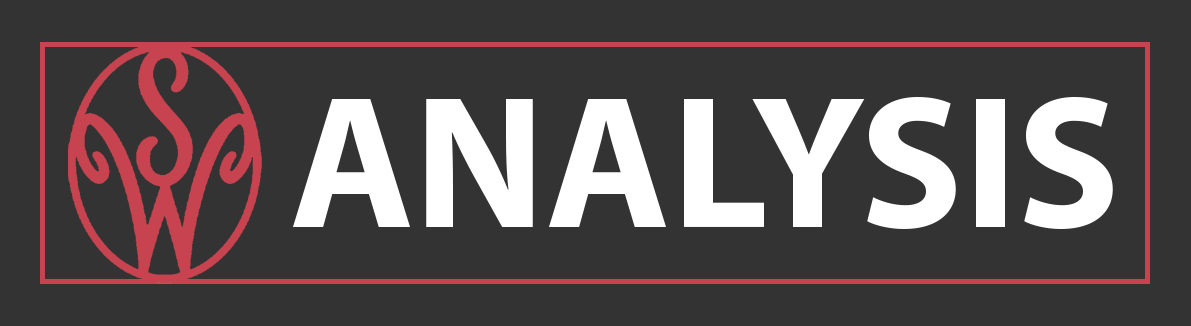
<style>
.page{position:relative;width:1191px;height:326px;background:#333333}
.page>*{position:absolute;margin:0}
.t1{font:190.3px "MyriadPro-Bold";color:#ffffff}
</style>
<div class="page">
<p class="t1" style="left:293px;top:97px;width:820px;height:132px">ANALYSIS</p>
</div>
